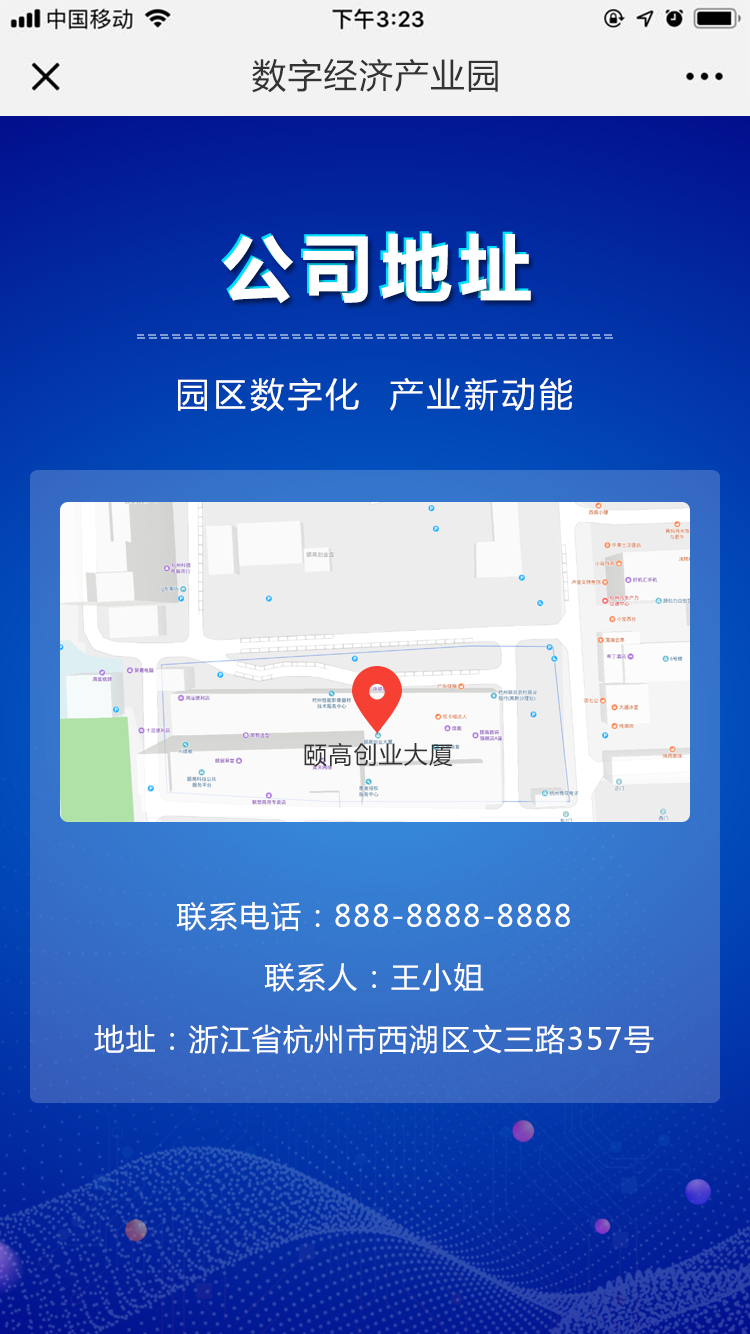
<style>
.page{position:relative;width:750px;height:1334px}
.page>*{position:absolute;margin:0}
.t1{font:34px "MicrosoftYaHei";letter-spacing:0.05em;color:#333333}
.t2{font:72px "MicrosoftYaHei-Bold";letter-spacing:0.1em;color:#ffffff}
.t3{font:34px "MicrosoftYaHei";letter-spacing:0.1em;color:#ffffff}
.t4{font:24px "MicrosoftYaHei";letter-spacing:0.05em;color:#333333}
.t5{font:30px "MicrosoftYaHei";letter-spacing:0.05em;color:#ffffff}
</style>
<div class="page">
<p class="t1" style="left:252px;top:58px;width:246px;height:35px">数字经济产业园</p>
<p class="t2" style="left:221px;top:231px;width:308px;height:70px">公司地址</p>
<p class="t2" style="left:223px;top:233px;width:308px;height:71px">公司地址</p>
<p class="t3" style="left:178px;top:377px;width:394px;height:35px">园区数字化  产业新动能</p>
<p class="t4" style="left:304px;top:742px;width:149px;height:25px">颐高创业大厦</p>
<p class="t5" style="left:176px;top:902px;width:394px;height:29px">联系电话：888-8888-8888</p>
<p class="t5" style="left:264px;top:962px;width:220px;height:30px">联系人：王小姐</p>
<p class="t5" style="left:94px;top:1024px;width:560px;height:30px">地址：浙江省杭州市西湖区文三路357号</p>
</div>
